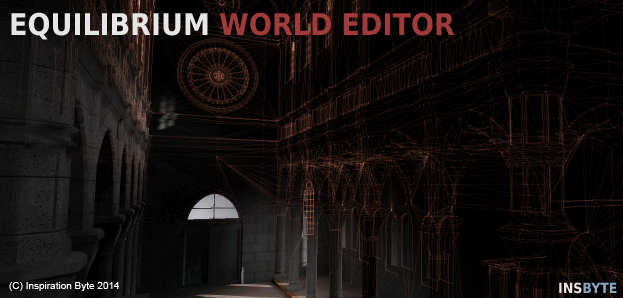
<style>
.page{position:relative;width:623px;height:298px}
.page>*{position:absolute;margin:0}
.t1{font:30px "DejaVuSansCondensed-Bold";color:#a13b3b}
.t2{font:30px "DejaVuSansCondensed-Bold";color:#e6e6e6}
.t3{font:10px "ArialMT";color:#ffffff}
.t4{font:14px "DejaVuSansCondensed-Bold";color:#86abc4}
.t5{font:14px "DejaVuSansCondensed-Bold";color:#e6e6e6}
</style>
<div class="page">
<p class="t1" style="left:11px;top:12px;width:444px;height:28px"><span class="t2">EQUILIBRIUM </span>WORLD EDITOR</p>
<p class="t3" style="left:9px;top:282px;width:111px;height:9px">(C) Inspiration Byte 2014</p>
<p class="t4" style="left:559px;top:282px;width:58px;height:12px"><span class="t5">INS</span>BYTE</p>
</div>
